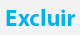
<style>
.page{position:relative;width:80px;height:35px;background:#f4f3f3}
.page>*{position:absolute;margin:0}
.t1{font:23.5px "MyriadPro-Bold";color:#00b2e8}
</style>
<div class="page">
<p class="t1" style="left:6px;top:9px;width:69px;height:17px">Excluir</p>
</div>
